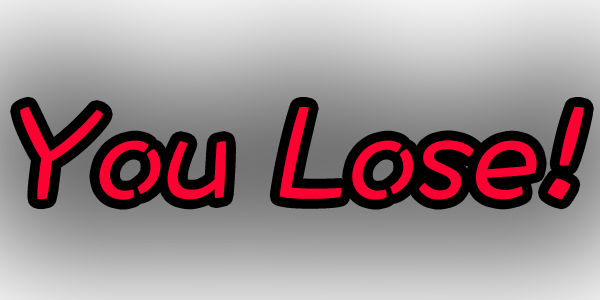
<style>
.page{position:relative;width:600px;height:300px}
.page>*{position:absolute;margin:0}
.t1{font:137px "DFWaWaTC-W5";color:#ff0033;font-style:italic}
</style>
<div class="page">
<p class="t1" style="left:20px;top:106px;width:564px;height:94px">You Lose!</p>
</div>
